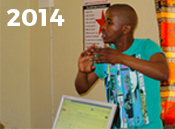
<style>
.page{position:relative;width:175px;height:129px}
.page>*{position:absolute;margin:0}
.t1{font:24px "Montserrat-Bold";letter-spacing:0.02em;color:#ffffff}
</style>
<div class="page">
<p class="t1" style="left:7px;top:9px;width:58px;height:17px">2014</p>
</div>
